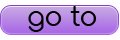
<style>
.page{position:relative;width:120px;height:40px;background:#ffffff}
.page>*{position:absolute;margin:0}
.t1{font:30px "Comfortaa";color:#000000}
</style>
<div class="page">
<p class="t1" style="left:28px;top:6px;width:69px;height:26px">go to</p>
</div>
